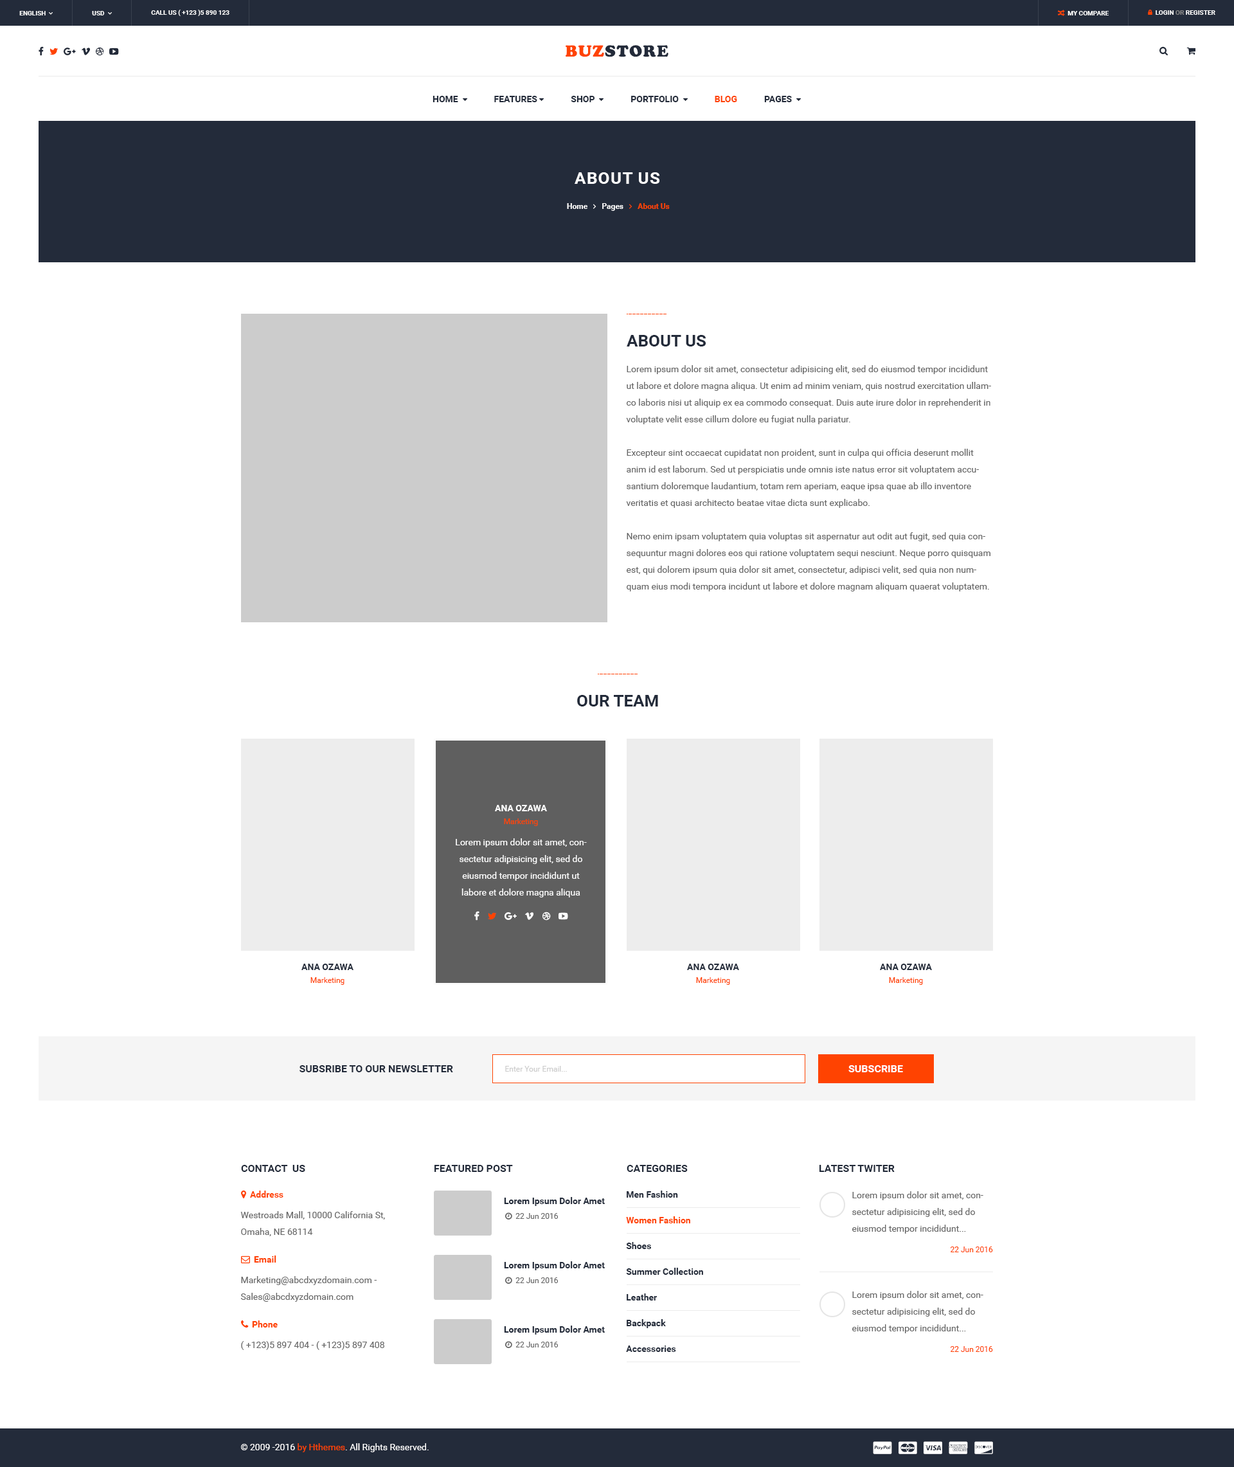
<style>
.page{position:relative;width:1234px;height:1467px;background:#ffffff}
.page>*{position:absolute;margin:0}
.t1{font:6.4px "Roboto-Bold";color:#ffffff;text-transform:uppercase}
.t2{font:16.7px "UTM-Cooper-Black";letter-spacing:0.05em;color:#232b3a;text-transform:uppercase}
.t3{font:16.7px "UTM-Cooper-Black";letter-spacing:0.05em;color:#ff4301;text-transform:uppercase}
.t4{font:16.7px "Roboto-Bold";letter-spacing:0.05em;color:#ffffff;text-transform:uppercase}
.t5{font:16.7px "Roboto-Bold";color:#232b3a;text-transform:uppercase}
.t6{font:9px/16.7px "Roboto-Regular";color:#666666}
.t7{font:9px/12.9px "Roboto-Bold";color:#ffffff;text-transform:uppercase}
.t8{font:7.7px/12.9px "Roboto-Regular";color:#ff4301}
.t9{font:9px/16.7px "Roboto-Regular";color:#ffffff}
.t10{font:9px/12.9px "Roboto-Bold";color:#232b3a;text-transform:uppercase}
.t11{font:10.3px "Roboto-Bold";color:#232b3a;text-transform:uppercase}
.t12{font:7.7px "Roboto-Regular";color:#cccccc}
.t13{font:10.3px "Roboto-Bold";color:#ffffff;text-transform:uppercase}
.t14{font:9px/25.7px "Roboto-Bold";color:#232b3a}
.t15{font:9px/25.7px "Roboto-Bold";color:#ff4301}
.t16{font:9px "Roboto-Bold";color:#232b3a}
.t17{font:7.7px "Roboto-Regular";color:#ff4301}
.t18{font:9px "Roboto-Regular";color:#666666}
.t19{font:9px "Roboto-Regular";color:#ffffff}
.t20{font:9px "Roboto-Regular";color:#ff4301}
</style>
<div class="page">
<p class="t1" style="left:151px;top:10px;width:79px;height:6px">call us ( +123 )5 890 123</p>
<p class="t2" style="left:565px;top:45px;width:104px;height:12px"><span class="t3">buz</span>store</p>
<p class="t4" style="left:575px;top:172px;width:85px;height:12px">about us</p>
<p class="t5" style="left:627px;top:335px;width:79px;height:11px">about us</p>
<p class="t6" style="left:626px;top:365px;width:365px;height:226px">Lorem ipsum dolor sit amet, consectetur adipisicing elit, sed do eiusmod tempor incididunt ut labore et dolore magna aliqua. Ut enim ad minim veniam, quis nostrud exercitation ullamco laboris nisi ut aliquip ex ea commodo consequat. Duis aute irure dolor in reprehenderit in voluptate velit esse cillum dolore eu fugiat nulla pariatur. <br><br>Excepteur sint occaecat cupidatat non proident, sunt in culpa qui officia deserunt mollit anim id est laborum. Sed ut perspiciatis unde omnis iste natus error sit voluptatem accusantium doloremque laudantium, totam rem aperiam, eaque ipsa quae ab illo inventore veritatis et quasi architecto beatae vitae dicta sunt explicabo. <br><br>Nemo enim ipsam voluptatem quia voluptas sit aspernatur aut odit aut fugit, sed quia consequuntur magni dolores eos qui ratione voluptatem sequi nesciunt. Neque porro quisquam est, qui dolorem ipsum quia dolor sit amet, consectetur, adipisci velit, sed quia non numquam eius modi tempora incidunt ut labore et dolore magnam aliquam quaerat voluptatem.</p>
<p class="t5" style="left:577px;top:695px;width:81px;height:11px">Our Team</p>
<p class="t7" style="left:495px;top:805px;width:52px;height:21px;text-align:center">Ana ozawa<br><span class="t8">Marketing</span></p>
<p class="t9" style="left:456px;top:838px;width:131px;height:59px;text-align:center">Lorem ipsum dolor sit amet, consectetur adipisicing elit, sed do eiusmod tempor incididunt ut labore et dolore magna aliqua</p>
<p class="t10" style="left:302px;top:964px;width:52px;height:21px;text-align:center">Ana ozawa<br><span class="t8">Marketing</span></p>
<p class="t10" style="left:687px;top:964px;width:52px;height:21px;text-align:center">Ana ozawa<br><span class="t8">Marketing</span></p>
<p class="t10" style="left:880px;top:964px;width:52px;height:21px;text-align:center">Ana ozawa<br><span class="t8">Marketing</span></p>
<p class="t11" style="left:300px;top:1065px;width:153px;height:7px">Subsribe to our newsletter</p>
<p class="t12" style="left:505px;top:1066px;width:62px;height:6px">Enter Your Email...</p>
<p class="t13" style="left:849px;top:1065px;width:54px;height:7px">Subscribe</p>
<p class="t11" style="left:241px;top:1165px;width:64px;height:7px">contact  us</p>
<p class="t11" style="left:435px;top:1165px;width:78px;height:7px">featured post</p>
<p class="t11" style="left:627px;top:1165px;width:61px;height:7px">categories</p>
<p class="t11" style="left:820px;top:1165px;width:75px;height:7px">latest twiter</p>
<p class="t14" style="left:626px;top:1191px;width:77px;height:161px">Men Fashion<br><span class="t15">Women Fashion<br></span>Shoes<br>Summer Collection<br>Leather<br>Backpack<br>Accessories</p>
<p class="t6" style="left:852px;top:1191px;width:132px;height:43px">Lorem ipsum dolor sit amet, consectetur adipisicing elit, sed do eiusmod tempor incididunt...</p>
<p class="t16" style="left:504px;top:1197px;width:101px;height:9px">Lorem Ipsum Dolor Amet</p>
<p class="t6" style="left:240px;top:1211px;width:145px;height:25px">Westroads Mall, 10000 California St, Omaha, NE 68114</p>
<p class="t17" style="left:950px;top:1246px;width:43px;height:6px">22 Jun 2016</p>
<p class="t16" style="left:504px;top:1261px;width:101px;height:9px">Lorem Ipsum Dolor Amet</p>
<p class="t6" style="left:240px;top:1276px;width:137px;height:26px">Marketing@abcdxyzdomain.com - <br>Sales@abcdxyzdomain.com</p>
<p class="t6" style="left:852px;top:1291px;width:132px;height:42px">Lorem ipsum dolor sit amet, consectetur adipisicing elit, sed do eiusmod tempor incididunt...</p>
<p class="t16" style="left:504px;top:1326px;width:101px;height:9px">Lorem Ipsum Dolor Amet</p>
<p class="t18" style="left:241px;top:1341px;width:143px;height:9px">( +123)5 897 404 - ( +123)5 897 408</p>
<p class="t17" style="left:950px;top:1346px;width:43px;height:6px">22 Jun 2016</p>
<p class="t19" style="left:241px;top:1443px;width:188px;height:9px">© 2009 -2016 <span class="t20">by Hthemes</span>. All Rights Reserved.</p>
</div>
